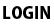
<style>
.page{position:relative;width:54px;height:25px;background:#ffffff}
.page>*{position:absolute;margin:0}
.t1{font:16.7px "KozGoPro-Heavy";color:#000000}
</style>
<div class="page">
<p class="t1" style="left:3px;top:6px;width:47px;height:13px">LOGIN</p>
</div>
